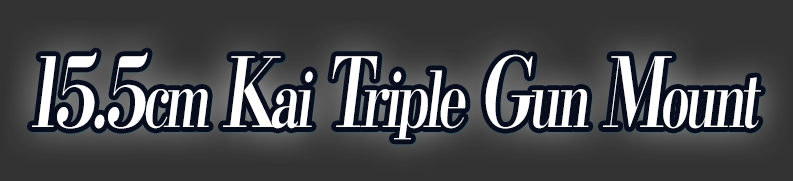
<style>
.page{position:relative;width:793px;height:181px;background:#333333}
.page>*{position:absolute;margin:0}
.t1{font:76.8px "KochoStd-Heavy";letter-spacing:-0.08em;color:#ffffff;font-style:italic;scale:0.69 1}
.t2{font:96px "KochoStd-Heavy";letter-spacing:-0.08em;color:#ffffff;font-style:italic;scale:0.69 1}
</style>
<div class="page">
<p class="t1" style="left:32px;top:52px;width:729px;height:88px"><span class="t2">15.5</span>cm<span class="t2"> K</span>ai<span class="t2"> T</span>riple<span class="t2"> G</span>un<span class="t2"> M</span>ount</p>
</div>
